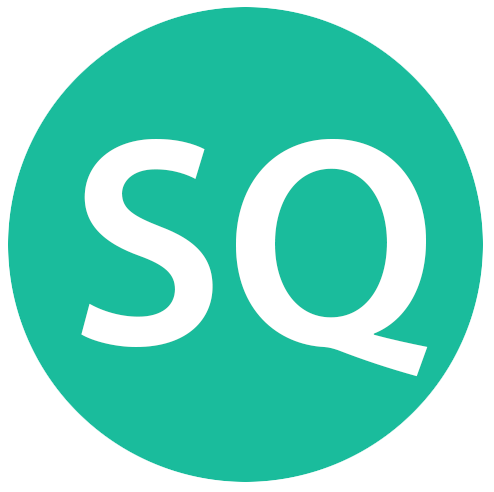
<style>
.page{position:relative;width:494px;height:492px;background:#1abc9c}
.page>*{position:absolute;margin:0}
.t1{font:300px "MyriadPro-Semibold";color:#ffffff}
</style>
<div class="page">
<p class="t1" style="left:81px;top:139px;width:347px;height:238px">SQ</p>
</div>
